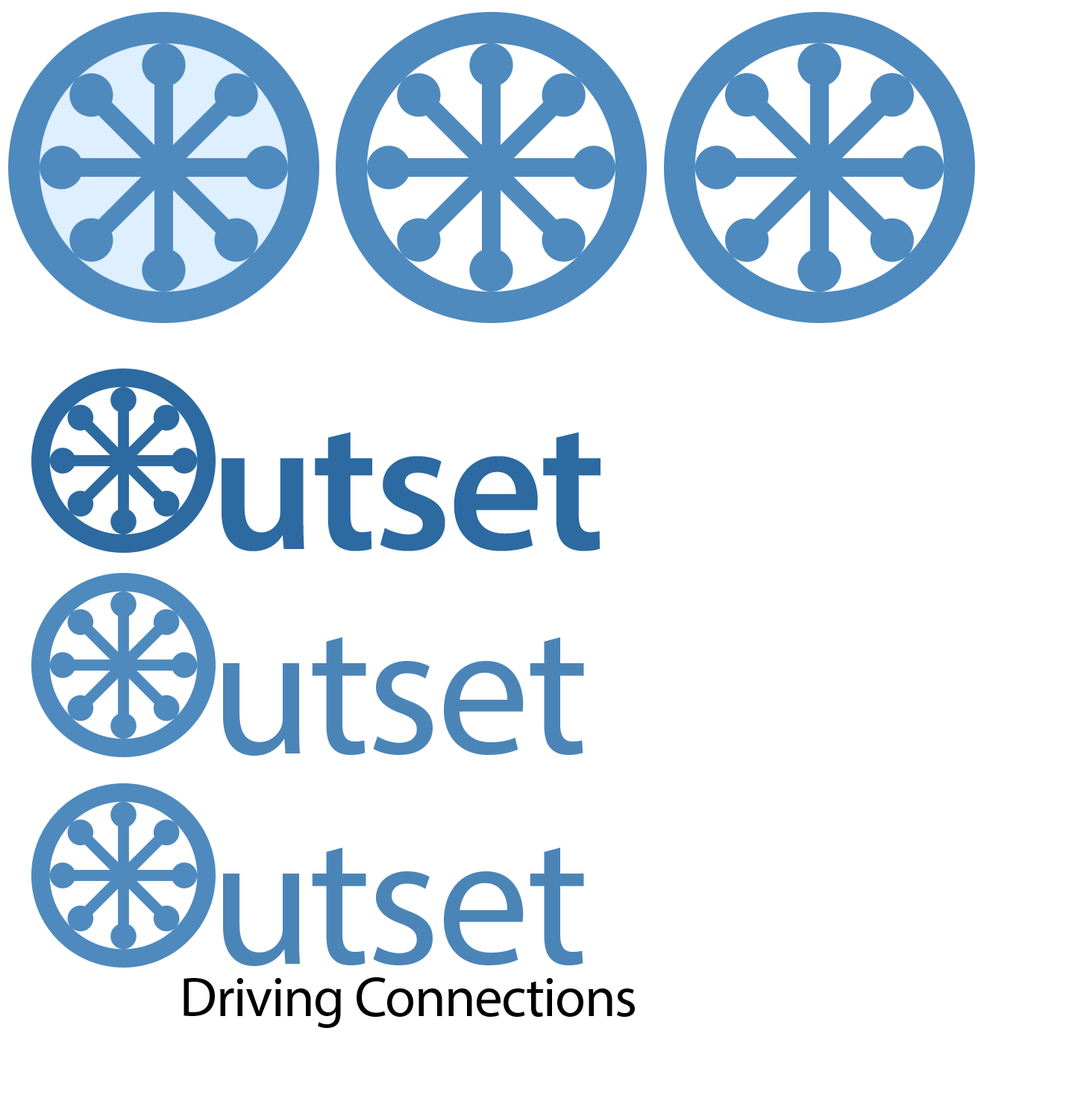
<style>
.page{position:relative;width:1066px;height:1119px;background:#ffffff}
.page>*{position:absolute;margin:0}
.t1{font:186.5px "MyriadPro-Semibold";letter-spacing:-0.02em;color:#2c6aa1}
.t2{font:186.5px "MyriadPro-Regular";letter-spacing:-0.02em;color:#4b85b8}
.t3{font:55.9px "MyriadPro-Regular";letter-spacing:-0.02em;color:#000000}
</style>
<div class="page">
<p class="t1" style="left:222px;top:432px;width:378px;height:119px">utset</p>
<p class="t2" style="left:223px;top:637px;width:361px;height:119px">utset</p>
<p class="t2" style="left:223px;top:847px;width:361px;height:119px">utset</p>
<p class="t3" style="left:183px;top:977px;width:452px;height:51px">Driving Connections</p>
</div>
